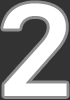
<style>
.page{position:relative;width:70px;height:100px;background:#333333}
.page>*{position:absolute;margin:0}
.t1{font:128.8px "Bahnschrift";color:#ffffff;scale:1.2 1}
</style>
<div class="page">
<p class="t1" style="left:3px;top:3px;width:64px;height:93px">2</p>
</div>
